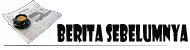
<style>
.page{position:relative;width:190px;height:50px;background:#ffffff}
.page>*{position:absolute;margin:0}
.t1{font:22.7px "ShowcardGothic-Reg";color:#06080a;scale:0.58 1}
</style>
<div class="page">
<p class="t1" style="left:57px;top:24px;width:131px;height:19px">Berita Sebelumnya</p>
</div>
